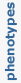
<style>
.page{position:relative;width:21px;height:83px;background:#f7f7f7}
.page>*{position:absolute;margin:0}
.t1{font:12px "Verdana-Bold";color:#336699}
</style>
<div class="page">
<p class="t1" style="left:4px;top:2px;width:13px;height:79px;rotate:-90deg">phenotypes</p>
</div>
